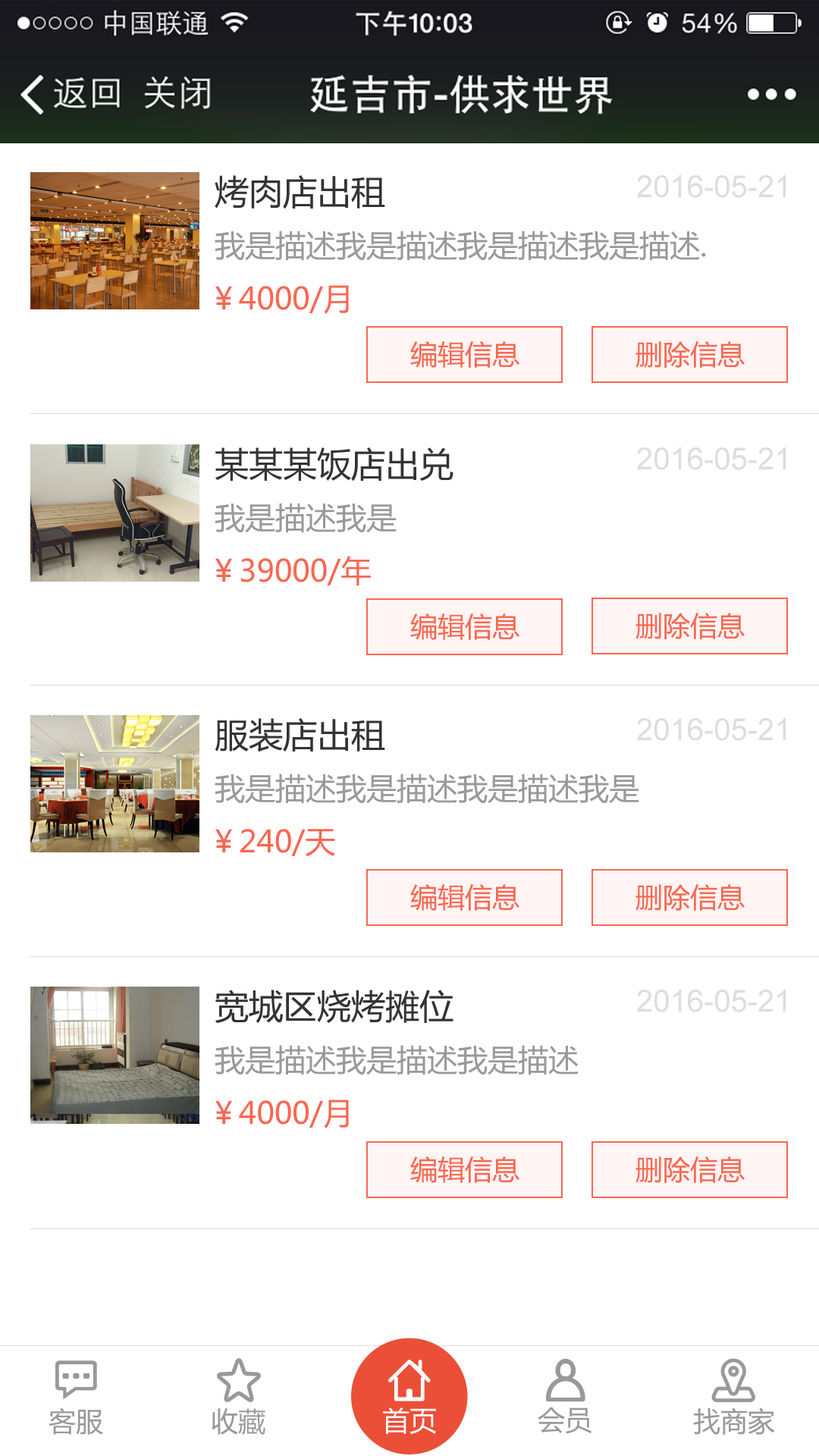
<style>
.page{position:relative;width:819px;height:1456px;background:#ffffff}
.page>*{position:absolute;margin:0}
.t1{font:34.1px "MicrosoftYaHei";color:#333333}
.t2{font:30.3px "ArialMT";color:#dddddd}
.t3{font:30.3px "MicrosoftYaHei";color:#999999}
.t4{font:30.3px "MicrosoftYaHei";color:#f96751}
.t5{font:27.3px "MicrosoftYaHei";color:#f96751}
.t6{font:27.3px "MicrosoftYaHei";color:#999999}
.t7{font:27.3px "MicrosoftYaHei";color:#ffffff}
</style>
<div class="page">
<p class="t1" style="left:215px;top:175px;width:170px;height:34px">烤肉店出租</p>
<p class="t2" style="left:637px;top:175px;width:149px;height:23px">2016-05-21</p>
<p class="t3" style="left:215px;top:231px;width:491px;height:30px">我是描述我是描述我是描述我是描述.</p>
<p class="t4" style="left:215px;top:285px;width:134px;height:29px">￥4000/月</p>
<p class="t5" style="left:410px;top:341px;width:109px;height:27px">编辑信息</p>
<p class="t5" style="left:635px;top:341px;width:110px;height:27px">删除信息</p>
<p class="t1" style="left:215px;top:447px;width:238px;height:34px">某某某饭店出兑</p>
<p class="t2" style="left:637px;top:447px;width:149px;height:23px">2016-05-21</p>
<p class="t3" style="left:215px;top:503px;width:182px;height:30px">我是描述我是</p>
<p class="t4" style="left:215px;top:556px;width:156px;height:30px">￥39000/年</p>
<p class="t5" style="left:410px;top:613px;width:109px;height:27px">编辑信息</p>
<p class="t5" style="left:635px;top:613px;width:110px;height:26px">删除信息</p>
<p class="t1" style="left:215px;top:718px;width:170px;height:34px">服装店出租</p>
<p class="t2" style="left:637px;top:718px;width:149px;height:23px">2016-05-21</p>
<p class="t3" style="left:215px;top:773px;width:424px;height:31px">我是描述我是描述我是描述我是</p>
<p class="t4" style="left:215px;top:829px;width:120px;height:28px">￥240/天</p>
<p class="t5" style="left:410px;top:884px;width:109px;height:27px">编辑信息</p>
<p class="t5" style="left:635px;top:884px;width:110px;height:27px">删除信息</p>
<p class="t1" style="left:215px;top:990px;width:238px;height:33px">宽城区烧烤摊位</p>
<p class="t2" style="left:637px;top:990px;width:149px;height:22px">2016-05-21</p>
<p class="t3" style="left:215px;top:1045px;width:364px;height:30px">我是描述我是描述我是描述</p>
<p class="t4" style="left:215px;top:1100px;width:134px;height:28px">￥4000/月</p>
<p class="t5" style="left:410px;top:1156px;width:109px;height:27px">编辑信息</p>
<p class="t5" style="left:635px;top:1156px;width:110px;height:27px">删除信息</p>
<p class="t6" style="left:49px;top:1407px;width:54px;height:28px">客服</p>
<p class="t6" style="left:212px;top:1408px;width:53px;height:27px">收藏</p>
<p class="t7" style="left:383px;top:1407px;width:53px;height:27px">首页</p>
<p class="t6" style="left:538px;top:1407px;width:54px;height:27px">会员</p>
<p class="t6" style="left:693px;top:1407px;width:82px;height:28px">找商家</p>
</div>
